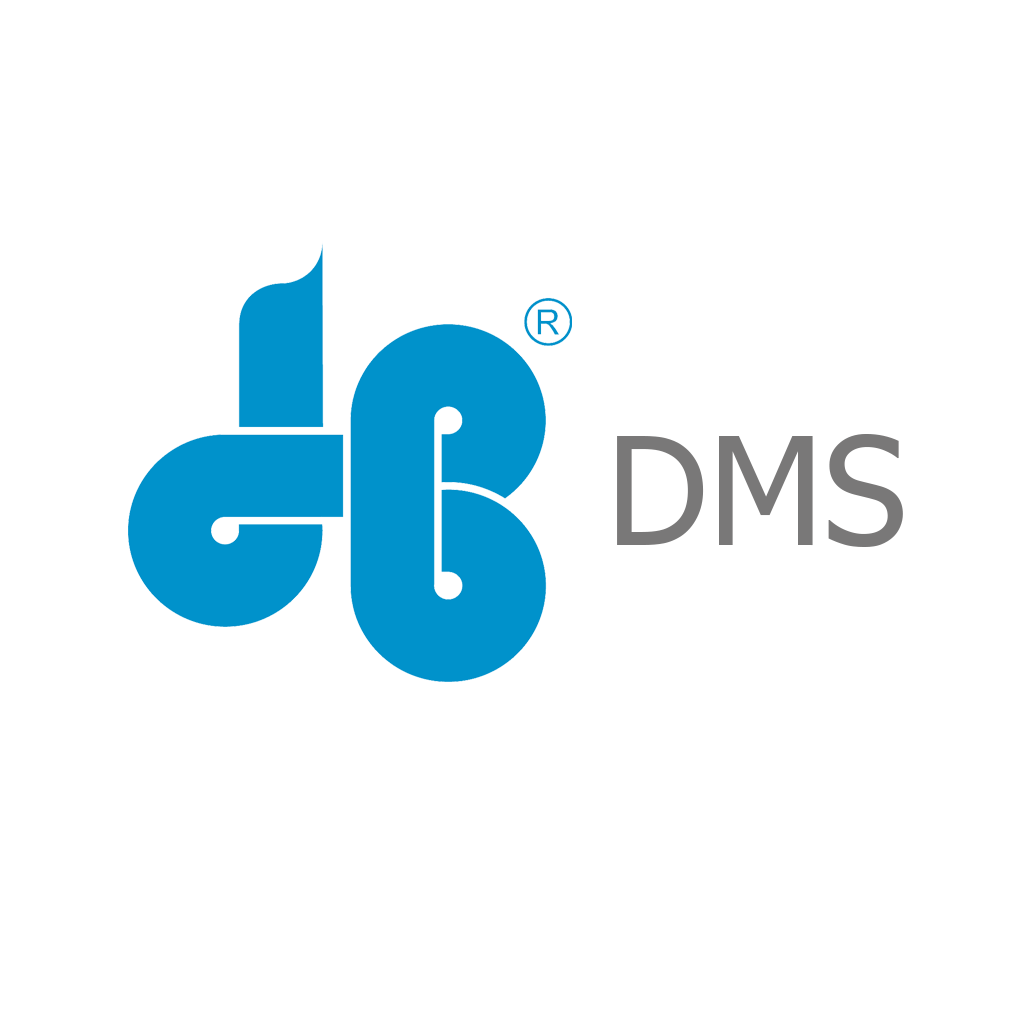
<style>
.page{position:relative;width:1017px;height:1017px;background:#ffffff}
.page>*{position:absolute;margin:0}
.t1{font:150px "Tahoma";color:#797878}
</style>
<div class="page">
<p class="t1" style="left:617px;top:434px;width:286px;height:113px">DMS</p>
</div>
